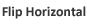
<style>
.page{position:relative;width:88px;height:23px;background:#ffffff}
.page>*{position:absolute;margin:0}
.t1{font:14px "Calibri-Bold";color:#363535}
</style>
<div class="page">
<p class="t1" style="left:2px;top:6px;width:84px;height:13px">Flip Horizontal</p>
</div>
